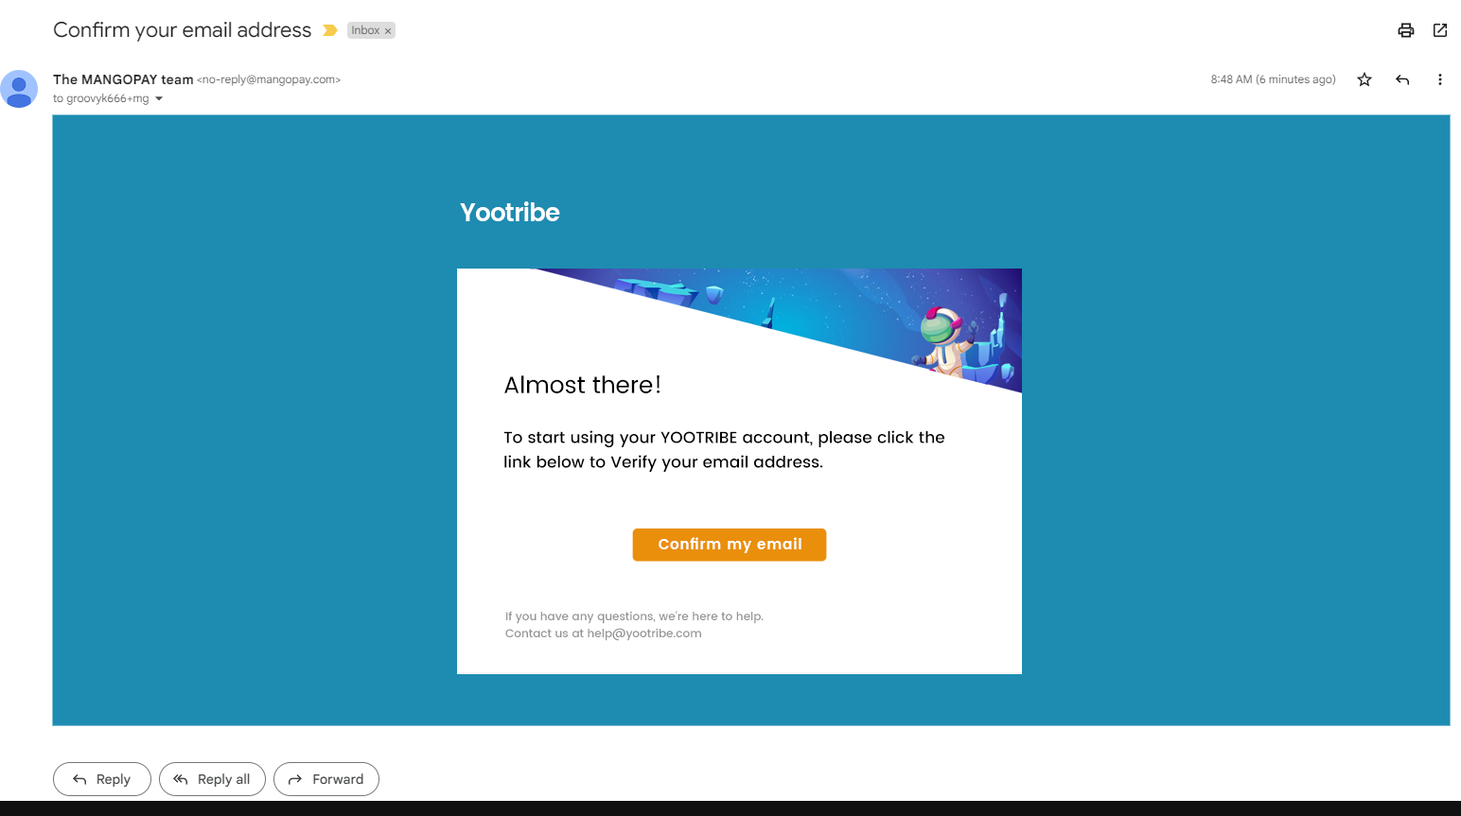
<style>
.page{position:relative;width:1461px;height:816px;background:#1e8cb1}
.page>*{position:absolute;margin:0}
.t1{font:24.8px "Poppins-SemiBold";letter-spacing:-0.04em;color:#ffffff}
.t2{font:23.6px "Poppins-Regular";color:#000000}
.t3{font:16.1px/24.6px "Poppins-Medium";color:#000000}
.t4{font:14.4px "Poppins-SemiBold";letter-spacing:0.04em;color:#ffffff}
.t5{font:11.4px/17px "Poppins-Medium";color:#949494}
</style>
<div class="page">
<p class="t1" style="left:460px;top:201px;width:100px;height:20px">Yootribe</p>
<p class="t2" style="left:504px;top:376px;width:155px;height:18px">Almost there!</p>
<p class="t3" style="left:503px;top:430px;width:441px;height:42px">To start using your YOOTRIBE account, please click the link below to Verify your email address.</p>
<p class="t4" style="left:658px;top:537px;width:143px;height:16px">Confirm my email</p>
<p class="t5" style="left:505px;top:611px;width:258px;height:30px">If you have any questions, we're here to help.<br>Contact us at help@yootribe.com</p>
</div>
